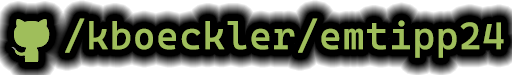
<style>
.page{position:relative;width:512px;height:75px;background:#000000}
.page>*{position:absolute;margin:0}
.t1{font:38px "CascadiaMono-Regular";color:#9fbe5b;font-weight:bold}
</style>
<div class="page">
<p class="t1" style="left:65px;top:18px;width:439px;height:40px">/kboeckler/emtipp24</p>
</div>
